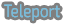
<style>
.page{position:relative;width:64px;height:24px;background:#ffffff}
.page>*{position:absolute;margin:0}
.t1{font:18px "Exo2-Regular";color:#74bfe1;scale:0.83 1}
</style>
<div class="page">
<p class="t1" style="left:4px;top:4px;width:56px;height:17px">Teleport</p>
</div>
